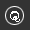
<style>
.page{position:relative;width:30px;height:30px;background:#333333}
.page>*{position:absolute;margin:0}
.t1{font:12px "Ravie";color:#ffffff}
</style>
<div class="page">
<p class="t1" style="left:10px;top:11px;width:10px;height:11px">Q</p>
</div>
